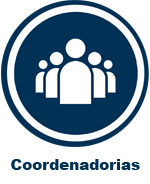
<style>
.page{position:relative;width:150px;height:184px;background:#ffffff}
.page>*{position:absolute;margin:0}
.t1{font:15px "Arial-Black";color:#023156}
</style>
<div class="page">
<p class="t1" style="left:11px;top:159px;width:129px;height:11px">Coordenadorias</p>
</div>
